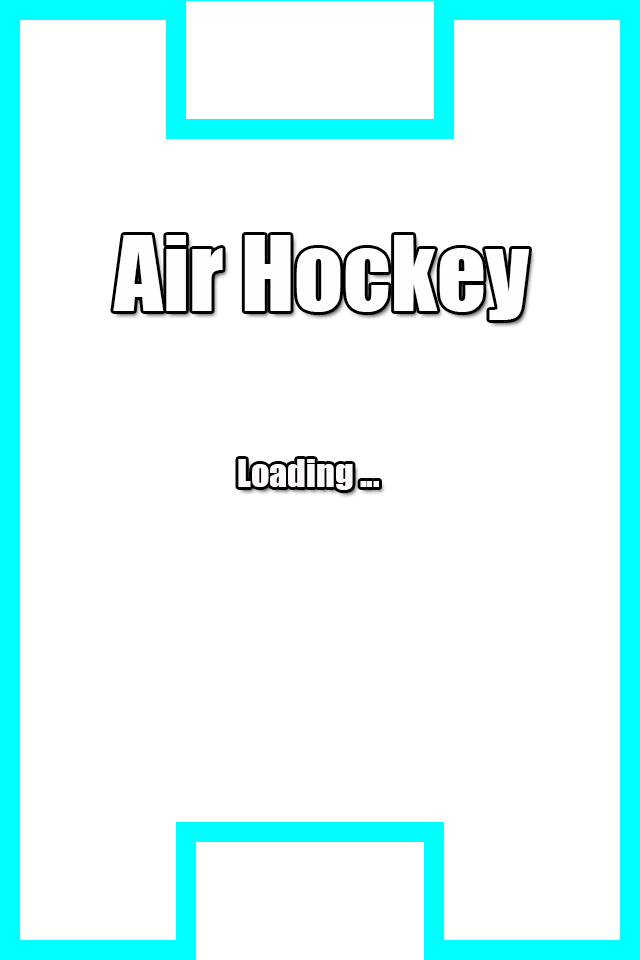
<style>
.page{position:relative;width:640px;height:960px;background:#ffffff}
.page>*{position:absolute;margin:0}
.t1{font:96px "Impact";color:#fffefe}
.t2{font:36px "Impact";color:#fdf9f9}
</style>
<div class="page">
<p class="t1" style="left:113px;top:235px;width:416px;height:85px">Air Hockey</p>
<p class="t2" style="left:238px;top:459px;width:141px;height:31px">Loading ...</p>
</div>
